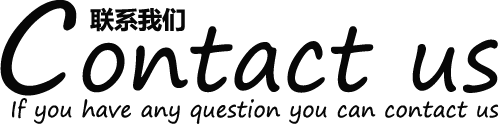
<style>
.page{position:relative;width:499px;height:124px;background:#ffffff}
.page>*{position:absolute;margin:0}
.t1{font:90px "SegoePrint";color:#070707}
.t2{font:120px "SegoePrint";color:#070707}
.t3{font:24px "MicrosoftYaHeiUI-Bold";color:#070707}
.t4{font:22px "SegoePrint";color:#070707}
</style>
<div class="page">
<p class="t1" style="left:0px;top:0px;width:498px;height:96px"><span class="t2">C</span>ontact us</p>
<p class="t3" style="left:90px;top:7px;width:95px;height:25px">联系我们</p>
<p class="t4" style="left:12px;top:98px;width:487px;height:26px">If you have any question you can contact us</p>
</div>
